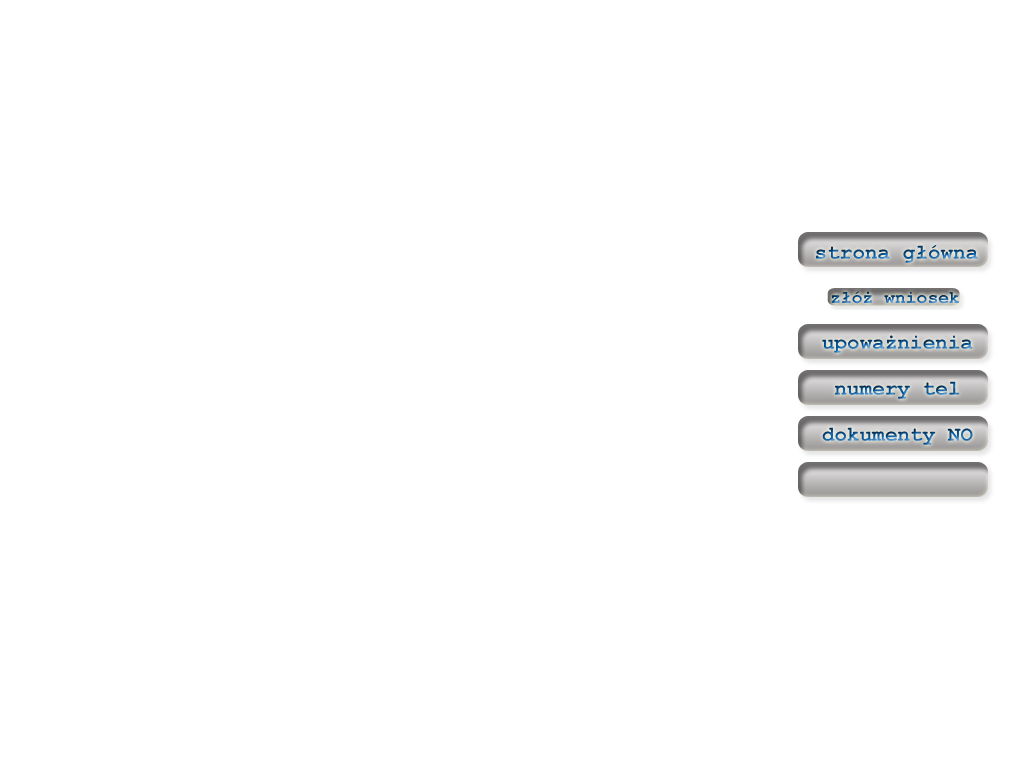
<style>
.page{position:relative;width:1024px;height:768px;background:#ffffff}
.page>*{position:absolute;margin:0}
.t1{font:21px "CourierNewPS-BoldMT"}
.t2{font:36px "CourierNewPS-BoldMT"}
</style>
<div class="page">
<p class="t1" style="left:822px;top:335px;width:151px;height:18px"><span class="t2"><br></span>upoważnienia</p>
<p class="t1" style="left:835px;top:381px;width:125px;height:18px"><span class="t2"><br></span>numery tel</p>
<p class="t1" style="left:822px;top:427px;width:151px;height:18px"><span class="t2"><br></span>dokumenty NO</p>
</div>
